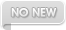
<style>
.page{position:relative;width:66px;height:30px}
.page>*{position:absolute;margin:0}
.t1{font:12px "Advantage-Demi";color:#e0e0e0}
</style>
<div class="page">
<p class="t1" style="left:11px;top:8px;width:46px;height:9px">NO NEW</p>
</div>
